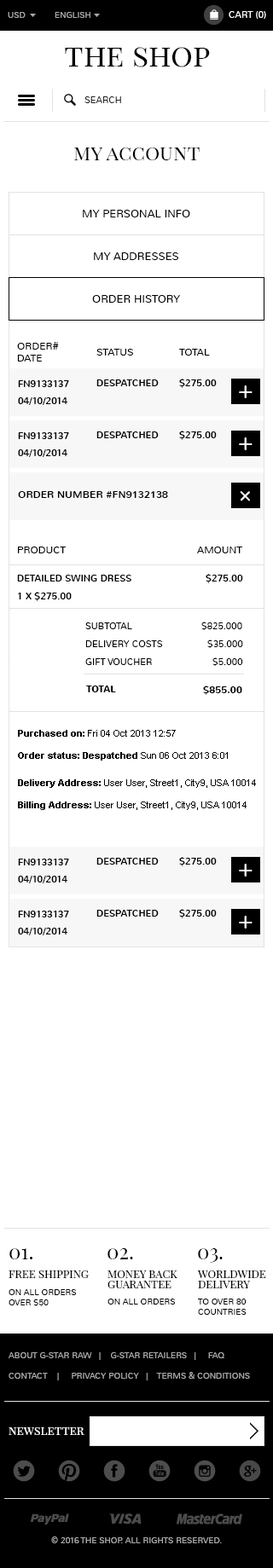
<style>
.page{position:relative;width:273px;height:1568px;background:#ffffff}
.page>*{position:absolute;margin:0}
.t1{font:8.5px "Nunito-Light";color:#aaaaaa;text-transform:uppercase}
.t2{font:9.4px "Nunito-Light";color:#ffffff;text-transform:uppercase}
.t3{font:30.7px "PlayfairDisplaySC-Regular";color:#000000}
.t4{font:9.4px "Nunito-Light";color:#282828;text-transform:uppercase}
.t5{font:20.5px "PlayfairDisplaySC-Regular";color:#000000}
.t6{font:11.1px "Nunito-Light";color:#000000;text-transform:uppercase}
.t7{font:10.2px "Nunito-Light";color:#000000;text-transform:uppercase}
.t8{font:9.4px "Nunito-Regular";color:#000000;text-transform:uppercase}
.t9{font:25.6px "Nunito-Light";color:#ffffff;text-transform:uppercase}
.t10{font:10.2px "Nunito-Regular";color:#000000;text-transform:uppercase}
.t11{font:9.4px "Nunito-Light";color:#000000;text-transform:uppercase}
.t12{font:9.4px "Nunito-Bold";color:#000000;text-transform:uppercase}
.t13{font:9.4px "Arial-BoldMT";color:#000000}
.t14{font:9.4px "ArialMT";color:#000000}
.t15{font:11.1px "PlayfairDisplaySC-Regular";color:#000000;text-transform:uppercase}
.t16{font:11.1px/10.2px "PlayfairDisplaySC-Regular";color:#000000;text-transform:uppercase}
.t17{font:8.5px "Nunito-Light";color:#000000;text-transform:uppercase}
.t18{font:8.5px/20.5px "Nunito-Light";color:#aaaaaa;text-transform:uppercase}
.t19{font:11.9px "PlayfairDisplaySC-Regular";color:#ffffff}
</style>
<div class="page">
<p class="t1" style="left:8px;top:12px;width:18px;height:6px">usD</p>
<p class="t1" style="left:55px;top:12px;width:35px;height:6px">English</p>
<p class="t2" style="left:229px;top:11px;width:37px;height:8px">Cart (0)</p>
<p class="t3" style="left:65px;top:47px;width:145px;height:20px">the shop</p>
<p class="t4" style="left:84px;top:96px;width:37px;height:7px">search</p>
<p class="t5" style="left:74px;top:148px;width:126px;height:12px">my account</p>
<p class="t6" style="left:83px;top:210px;width:107px;height:7px">my personal info</p>
<p class="t6" style="left:94px;top:252px;width:84px;height:8px">my addresses</p>
<p class="t6" style="left:92px;top:295px;width:88px;height:8px">order history</p>
<p class="t7" style="left:17px;top:342px;width:42px;height:20px">order#<br>date</p>
<p class="t7" style="left:96px;top:349px;width:37px;height:7px">status</p>
<p class="t7" style="left:179px;top:349px;width:31px;height:7px">total</p>
<p class="t8" style="left:18px;top:380px;width:51px;height:7px">FN9133137</p>
<p class="t8" style="left:96px;top:379px;width:63px;height:7px">Despatched</p>
<p class="t8" style="left:179px;top:379px;width:38px;height:9px">$275.00</p>
<p class="t9" style="left:239px;top:385px;width:13px;height:13px">+</p>
<p class="t8" style="left:18px;top:397px;width:49px;height:8px">04/10/2014</p>
<p class="t8" style="left:18px;top:432px;width:51px;height:7px">FN9133137</p>
<p class="t8" style="left:96px;top:431px;width:63px;height:7px">Despatched</p>
<p class="t8" style="left:179px;top:431px;width:38px;height:9px">$275.00</p>
<p class="t9" style="left:239px;top:437px;width:13px;height:13px">+</p>
<p class="t8" style="left:18px;top:449px;width:49px;height:8px">04/10/2014</p>
<p class="t10" style="left:18px;top:491px;width:150px;height:7px">Order number #FN9132138</p>
<p class="t9" style="left:240px;top:491px;width:10px;height:10px;rotate:45deg">+</p>
<p class="t7" style="left:18px;top:547px;width:48px;height:6px">product</p>
<p class="t7" style="left:197px;top:547px;width:45px;height:6px">amount</p>
<p class="t8" style="left:17px;top:575px;width:114px;height:6px">detailed swing dress</p>
<p class="t8" style="left:205px;top:574px;width:38px;height:9px">$275.00</p>
<p class="t8" style="left:18px;top:592px;width:54px;height:9px">1 x $275.00</p>
<p class="t11" style="left:85px;top:622px;width:47px;height:7px">subtotal</p>
<p class="t11" style="left:201px;top:622px;width:41px;height:8px">$825.000</p>
<p class="t11" style="left:85px;top:640px;width:78px;height:7px">delivery costs</p>
<p class="t11" style="left:207px;top:639px;width:36px;height:9px">$35.000</p>
<p class="t11" style="left:85px;top:658px;width:67px;height:7px">gift voucher</p>
<p class="t11" style="left:212px;top:657px;width:31px;height:9px">$5.000</p>
<p class="t12" style="left:86px;top:686px;width:30px;height:6px">total</p>
<p class="t12" style="left:203px;top:686px;width:39px;height:9px">$855.00</p>
<p class="t13" style="left:18px;top:730px;width:210px;height:31px">Purchased on:<span class="t14"> Fri 04 Oct 2013 12:57<br><br></span>Order status: Despatched<span class="t14"> Sun 06 Oct 2013 6:01</span></p>
<p class="t14" style="left:18px;top:779px;width:238px;height:31px"><span class="t13">Delivery Address: </span>User User, Street1, City9, USA 10014<br><br><span class="t13">Billing Address: </span>User User, Street1, City9, USA 10014</p>
<p class="t8" style="left:96px;top:858px;width:63px;height:7px">Despatched</p>
<p class="t8" style="left:179px;top:857px;width:38px;height:9px">$275.00</p>
<p class="t8" style="left:18px;top:859px;width:51px;height:6px">FN9133137</p>
<p class="t9" style="left:239px;top:864px;width:13px;height:13px">+</p>
<p class="t8" style="left:18px;top:876px;width:49px;height:7px">04/10/2014</p>
<p class="t8" style="left:18px;top:911px;width:51px;height:6px">FN9133137</p>
<p class="t8" style="left:96px;top:910px;width:63px;height:7px">Despatched</p>
<p class="t8" style="left:179px;top:909px;width:38px;height:9px">$275.00</p>
<p class="t9" style="left:239px;top:916px;width:13px;height:13px">+</p>
<p class="t8" style="left:18px;top:928px;width:49px;height:7px">04/10/2014</p>
<p class="t5" style="left:9px;top:1248px;width:23px;height:11px">01.</p>
<p class="t5" style="left:107px;top:1248px;width:26px;height:11px">02.</p>
<p class="t5" style="left:198px;top:1248px;width:25px;height:15px">03.</p>
<p class="t15" style="left:9px;top:1270px;width:80px;height:8px">Free Shipping</p>
<p class="t16" style="left:107px;top:1270px;width:70px;height:18px">Money back<br>guarantee</p>
<p class="t16" style="left:197px;top:1270px;width:69px;height:18px">Worldwide<br>Delivery</p>
<p class="t17" style="left:9px;top:1289px;width:68px;height:17px">On all orders<br>over $50</p>
<p class="t17" style="left:107px;top:1299px;width:69px;height:6px">On all orders</p>
<p class="t17" style="left:198px;top:1299px;width:48px;height:16px">To over 80<br>countries</p>
<p class="t18" style="left:9px;top:1352px;width:241px;height:28px">About G-Star Raw   |    G-Star Retailers   |     FAQ<br>Contact    |     Privacy Policy   |    Terms &amp; Conditions</p>
<p class="t19" style="left:9px;top:1427px;width:75px;height:8px">newsletter</p>
<p class="t1" style="left:51px;top:1536px;width:171px;height:7px">© 2016 the shop. All Rights Reserved.</p>
</div>
